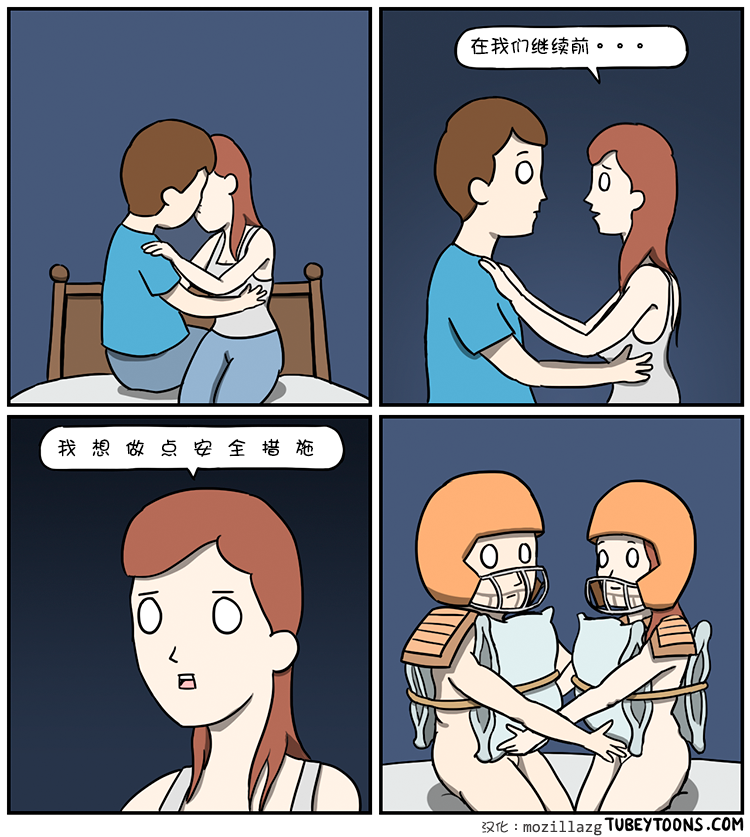
<style>
.page{position:relative;width:750px;height:837px}
.page>*{position:absolute;margin:0}
.t1{font:20px "DFGirl";color:#000000}
.t2{font:20px "DFGirl";letter-spacing:0.7em;color:#000000}
</style>
<div class="page">
<p class="t1" style="left:471px;top:36px;width:172px;height:19px">在我们继续前。。。</p>
<p class="t2" style="left:57px;top:438px;width:257px;height:19px">我想做点安全措施</p>
</div>
